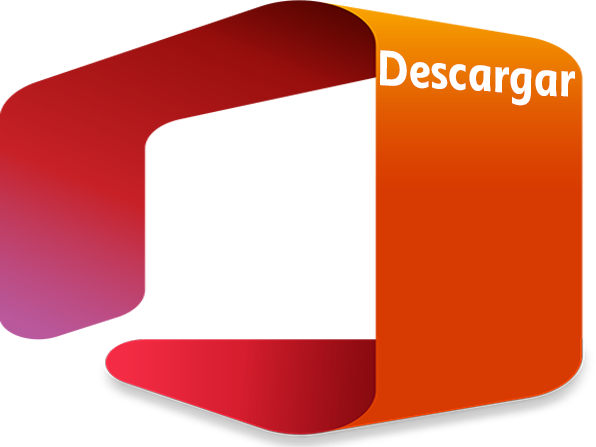
<style>
.page{position:relative;width:596px;height:447px;background:#ffffff}
.page>*{position:absolute;margin:0}
.t1{font:50.9px "SegoeUI-BoldItalic";color:#ffffff;scale:0.83 1}
</style>
<div class="page">
<p class="t1" style="left:380px;top:50px;width:196px;height:56px;rotate:4deg">Descargar</p>
</div>
